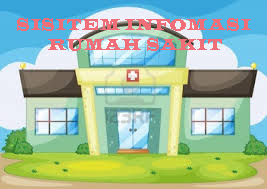
<style>
.page{position:relative;width:267px;height:189px}
.page>*{position:absolute;margin:0}
.t1{font:16.6px "LatinWide";color:#ef6e77;scale:0.75 1}
</style>
<div class="page">
<p class="t1" style="left:17px;top:18px;width:234px;height:33px;text-align:center">SISITEM INFOMASI <br>RUMAH SAKIT</p>
</div>
